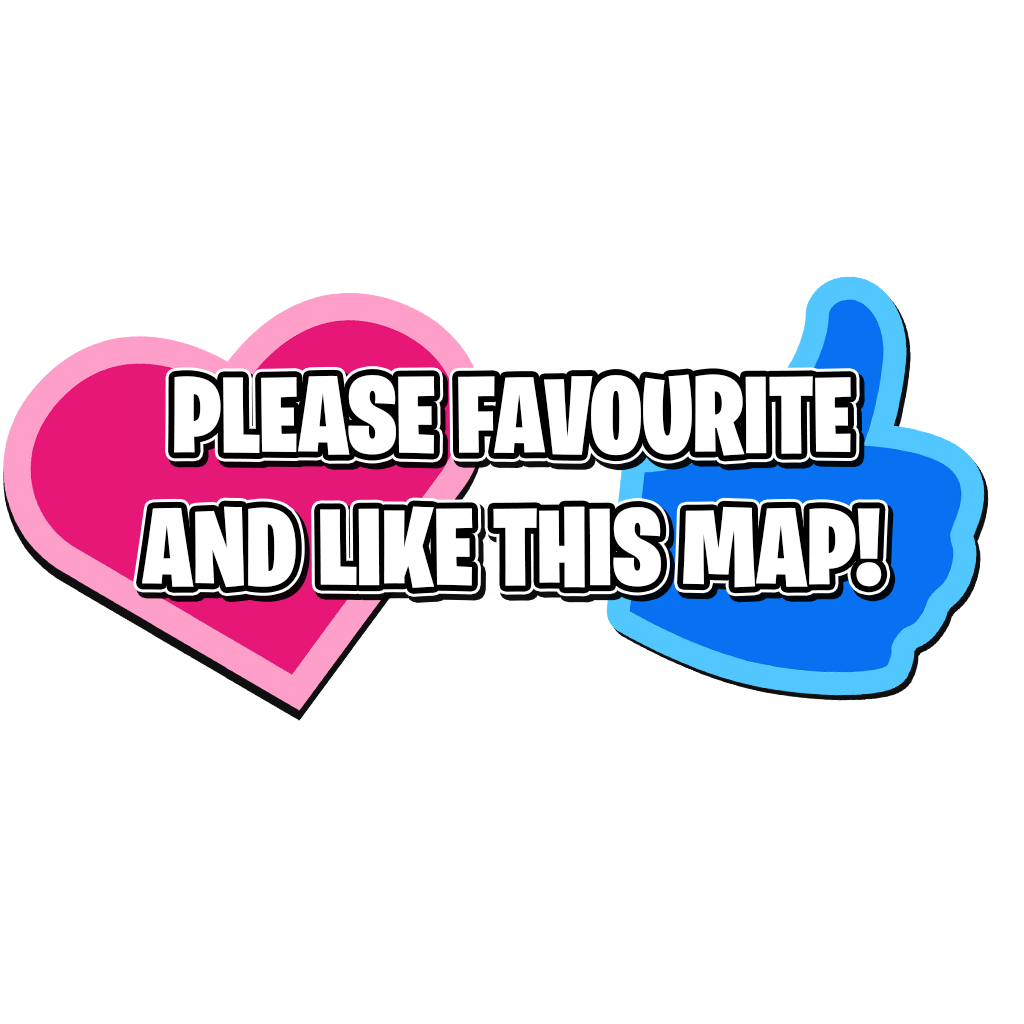
<style>
.page{position:relative;width:1024px;height:1024px;background:#ffffff}
.page>*{position:absolute;margin:0}
.t1{font:109.7px "BurbankBigCondensed-Black";color:#ffffff}
</style>
<div class="page">
<p class="t1" style="left:142px;top:374px;width:740px;height:214px;text-align:center">PLEASE FAVOURITE <br>AND LIKE THIS MAP!</p>
</div>
